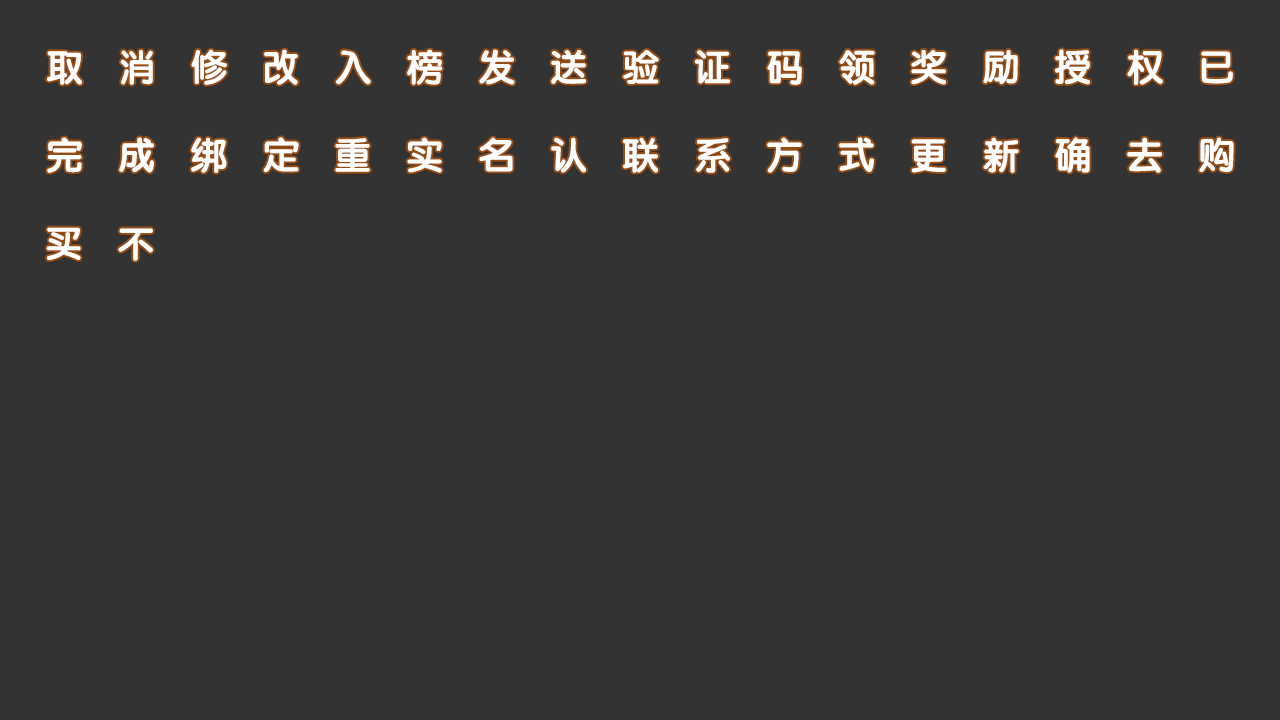
<style>
.page{position:relative;width:1280px;height:720px;background:#333333}
.page>*{position:absolute;margin:0}
.t1{font:36px "STYuanti-SC-Bold";letter-spacing:1em;color:#ffffff}
</style>
<div class="page">
<p class="t1" style="left:47px;top:49px;width:1186px;height:36px">取消修改入榜发送验证码领奖励授权已</p>
<p class="t1" style="left:47px;top:137px;width:1187px;height:36px">完成绑定重实名认联系方式更新确去购</p>
<p class="t1" style="left:46px;top:227px;width:107px;height:34px">买不</p>
</div>
